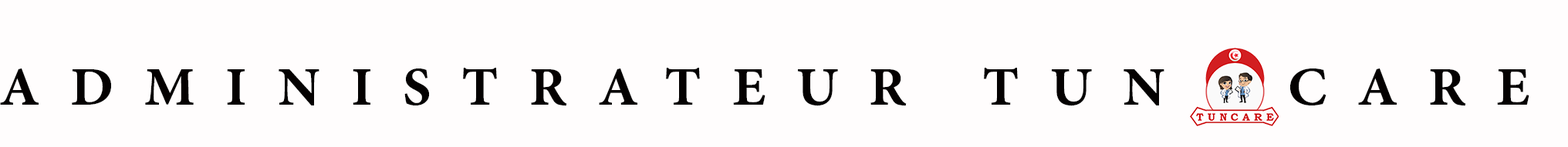
<style>
.page{position:relative;width:1568px;height:147px;background:#fffdfd}
.page>*{position:absolute;margin:0}
.t1{font:77.2px "AdobeArabic-Bold";letter-spacing:0.4em;color:#040101}
</style>
<div class="page">
<p class="t1" style="left:0px;top:68px;width:1529px;height:38px">ADMINISTRATEUR TUN  CARE</p>
</div>
